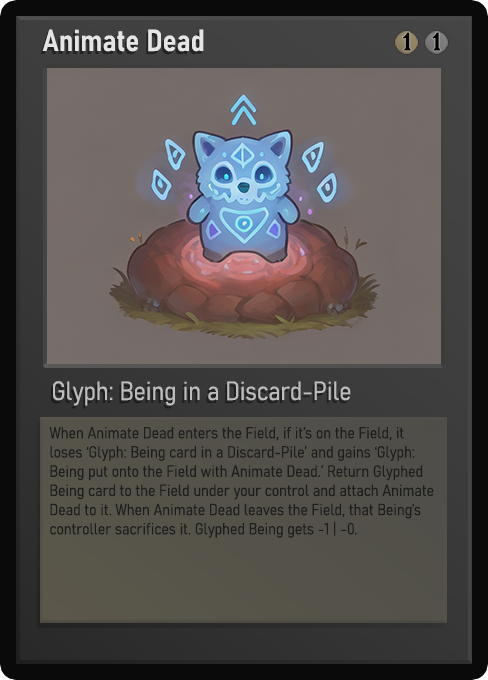
<style>
.page{position:relative;width:488px;height:680px}
.page>*{position:absolute;margin:0}
.t1{font:30px "Bahnschrift-SemiBoldSemiCondensed";color:#f2f2f2;font-weight:bold}
.t2{font:25px "WTRRoycroft";color:#000000;font-weight:bold;scale:1.09 1}
.t3{font:26px "Bahnschrift-LightSemiCondensed";color:#c8c8c8;font-weight:bold}
.t4{font:16px "Bahnschrift-LightSemiCondensed";color:#1e1e1e;font-weight:bold}
</style>
<div class="page">
<p class="t1" style="left:42px;top:29px;width:162px;height:23px;opacity:0.9">Animate Dead</p>
<p class="t2" style="left:403px;top:32px;width:8px;height:19px">1</p>
<p class="t2" style="left:432px;top:32px;width:9px;height:19px">1</p>
<p class="t3" style="left:53px;top:381px;width:298px;height:25px;opacity:0.9">Glyph: Being in a Discard-Pile</p>
<p class="t4" style="left:49px;top:427px;width:385px;height:111px">When Animate Dead enters the Field, if it’s on the Field, it loses ‘Glyph: Being card in a Discard-Pile’ and gains ‘Glyph: Being put onto the Field with Animate Dead.’ Return Glyphed Being card to the Field under your control and attach Animate Dead to it. When Animate Dead leaves the Field, that Being’s controller sacrifices it. Glyphed Being gets -1 | -0.</p>
</div>
